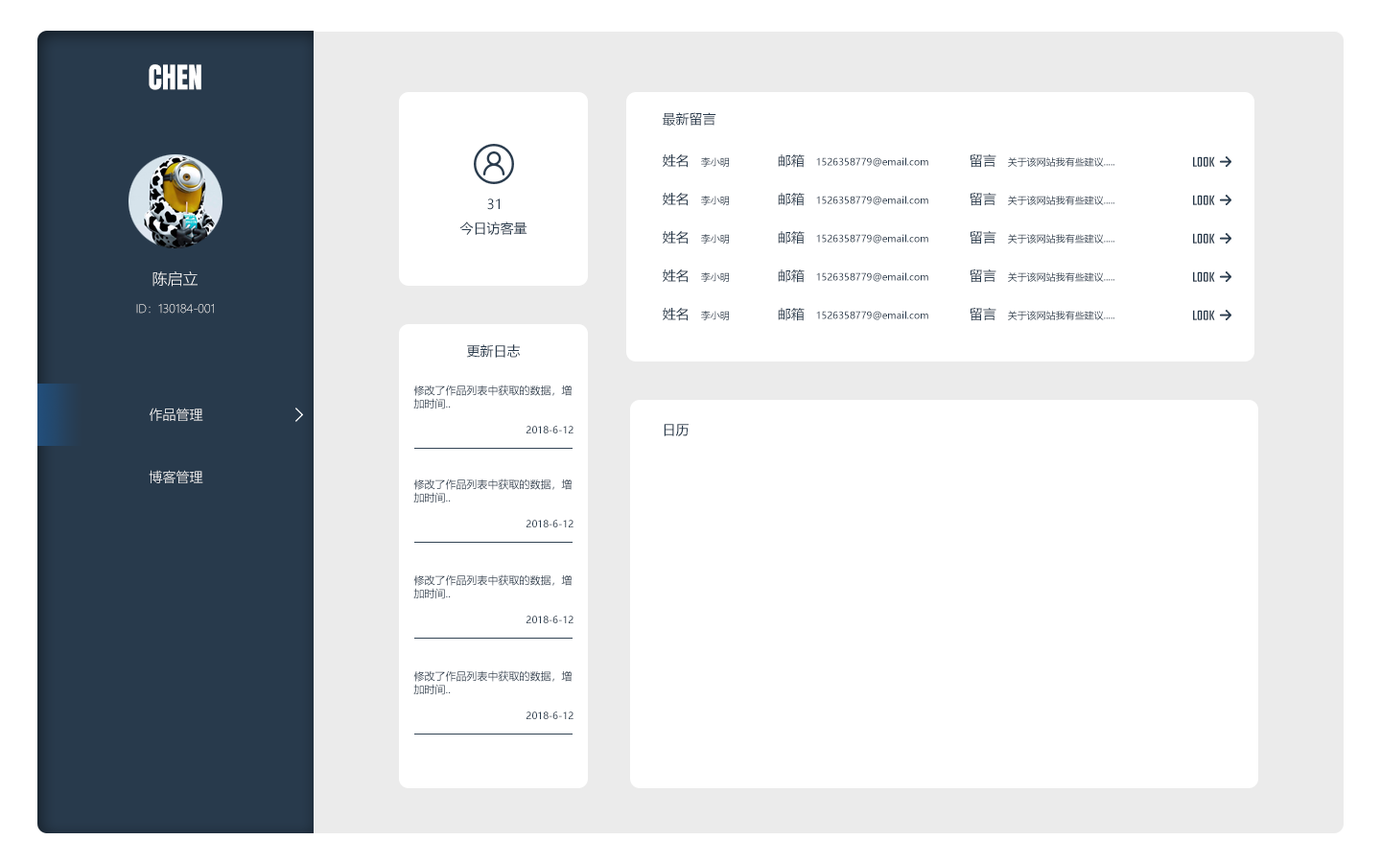
<style>
.page{position:relative;width:1381px;height:863px;background:#ffffff}
.page>*{position:absolute;margin:0}
.t1{font:28.8px "Anton-Regular";color:#ffffff}
.t2{font:13.4px "MicrosoftYaHei";color:#283a4c}
.t3{font:9.6px "MicrosoftYaHei"}
.t4{font:9.6px "MicrosoftYaHei";color:#283a4c}
.t5{font:15.3px "Teko-Regular";color:#283a4c}
.t6{font:15.3px "MicrosoftYaHeiLight";color:#ffffff}
.t7{font:11.5px "MicrosoftYaHeiLight"}
.t8{font:10.6px/13.4px "MicrosoftYaHei";color:#283a4c}
.t9{font:13.4px "MicrosoftYaHeiLight";color:#ffffff}
</style>
<div class="page">
<p class="t1" style="left:149px;top:64px;width:52px;height:26px">CHEN</p>
<p class="t2" style="left:662px;top:112px;width:55px;height:14px">最新留言</p>
<p class="t2" style="left:663px;top:153px;width:25px;height:15px">姓名</p>
<p class="t3" style="left:701px;top:157px;width:28px;height:10px">李小明</p>
<p class="t2" style="left:778px;top:154px;width:27px;height:14px">邮箱</p>
<p class="t4" style="left:816px;top:157px;width:113px;height:10px">1526358779@email.com</p>
<p class="t2" style="left:970px;top:154px;width:27px;height:14px">留言</p>
<p class="t4" style="left:1008px;top:157px;width:107px;height:10px">关于该网站我有些建议.....</p>
<p class="t5" style="left:1193px;top:156px;width:22px;height:11px">LOOK</p>
<p class="t2" style="left:663px;top:192px;width:25px;height:14px">姓名</p>
<p class="t3" style="left:701px;top:196px;width:28px;height:9px">李小明</p>
<p class="t2" style="left:778px;top:193px;width:27px;height:13px">邮箱</p>
<p class="t4" style="left:816px;top:196px;width:113px;height:9px">1526358779@email.com</p>
<p class="t2" style="left:970px;top:193px;width:27px;height:13px">留言</p>
<p class="t4" style="left:1008px;top:196px;width:107px;height:9px">关于该网站我有些建议.....</p>
<p class="t5" style="left:1193px;top:195px;width:22px;height:10px">LOOK</p>
<p class="t2" style="left:487px;top:199px;width:13px;height:11px">31</p>
<p class="t2" style="left:459px;top:222px;width:69px;height:13px">今日访客量</p>
<p class="t2" style="left:663px;top:230px;width:25px;height:15px">姓名</p>
<p class="t2" style="left:778px;top:231px;width:27px;height:14px">邮箱</p>
<p class="t2" style="left:970px;top:231px;width:27px;height:14px">留言</p>
<p class="t5" style="left:1193px;top:233px;width:22px;height:11px">LOOK</p>
<p class="t3" style="left:701px;top:234px;width:28px;height:10px">李小明</p>
<p class="t4" style="left:816px;top:234px;width:113px;height:10px">1526358779@email.com</p>
<p class="t4" style="left:1008px;top:234px;width:107px;height:10px">关于该网站我有些建议.....</p>
<p class="t2" style="left:663px;top:269px;width:25px;height:14px">姓名</p>
<p class="t2" style="left:778px;top:270px;width:27px;height:13px">邮箱</p>
<p class="t2" style="left:970px;top:270px;width:27px;height:13px">留言</p>
<p class="t6" style="left:153px;top:271px;width:45px;height:16px">陈启立</p>
<p class="t3" style="left:701px;top:272px;width:28px;height:10px">李小明</p>
<p class="t4" style="left:816px;top:272px;width:113px;height:10px">1526358779@email.com</p>
<p class="t4" style="left:1008px;top:272px;width:107px;height:10px">关于该网站我有些建议.....</p>
<p class="t5" style="left:1193px;top:271px;width:22px;height:11px">LOOK</p>
<p class="t7" style="left:136px;top:304px;width:78px;height:10px">ID：130184-001</p>
<p class="t2" style="left:663px;top:307px;width:25px;height:14px">姓名</p>
<p class="t3" style="left:701px;top:311px;width:28px;height:9px">李小明</p>
<p class="t2" style="left:778px;top:308px;width:27px;height:13px">邮箱</p>
<p class="t4" style="left:816px;top:311px;width:113px;height:9px">1526358779@email.com</p>
<p class="t2" style="left:970px;top:308px;width:27px;height:13px">留言</p>
<p class="t4" style="left:1008px;top:311px;width:107px;height:9px">关于该网站我有些建议.....</p>
<p class="t5" style="left:1193px;top:310px;width:22px;height:10px">LOOK</p>
<p class="t2" style="left:466px;top:344px;width:55px;height:14px">更新日志</p>
<p class="t8" style="left:413px;top:385px;width:159px;height:25px">修改了作品列表中获取的数据，增<br>加时间..</p>
<p class="t9" style="left:150px;top:408px;width:53px;height:13px">作品管理</p>
<p class="t4" style="left:527px;top:426px;width:47px;height:8px">2018-6-12</p>
<p class="t2" style="left:664px;top:424px;width:25px;height:12px">日历</p>
<p class="t9" style="left:149px;top:470px;width:54px;height:13px">博客管理</p>
<p class="t8" style="left:413px;top:479px;width:159px;height:25px">修改了作品列表中获取的数据，增<br>加时间..</p>
<p class="t4" style="left:527px;top:520px;width:47px;height:8px">2018-6-12</p>
<p class="t8" style="left:413px;top:575px;width:159px;height:25px">修改了作品列表中获取的数据，增<br>加时间..</p>
<p class="t4" style="left:527px;top:616px;width:47px;height:7px">2018-6-12</p>
<p class="t8" style="left:413px;top:670px;width:159px;height:25px">修改了作品列表中获取的数据，增<br>加时间..</p>
<p class="t4" style="left:527px;top:712px;width:47px;height:7px">2018-6-12</p>
</div>
